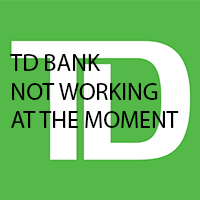
<style>
.page{position:relative;width:200px;height:200px;background:#54b948}
.page>*{position:absolute;margin:0}
.t1{font:24px "MyriadPro-Regular";color:#000000}
</style>
<div class="page">
<p class="t1" style="left:10px;top:54px;width:169px;height:74px">TD BANK<br>NOT WORKING<br>AT THE MOMENT</p>
</div>
